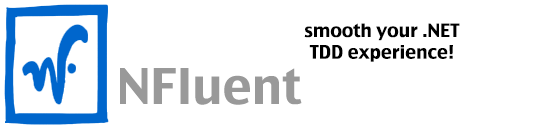
<style>
.page{position:relative;width:544px;height:132px;background:#ffffff}
.page>*{position:absolute;margin:0}
.t1{font:18px "CharcoalCY";color:#000000}
.t2{font:48px "CharcoalCY";color:#999999}
</style>
<div class="page">
<p class="t1" style="left:304px;top:23px;width:156px;height:39px;text-align:center">smooth your .NET<br>TDD experience!</p>
<p class="t2" style="left:120px;top:68px;width:182px;height:37px">NFluent</p>
</div>
